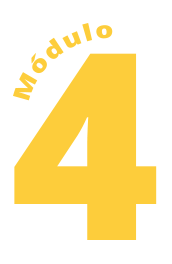
<style>
.page{position:relative;width:172px;height:264px;background:#ffffff}
.page>*{position:absolute;margin:0}
.t1{font:22.8px "OpenSans-Extrabold";letter-spacing:0.1em;color:#fdcd3b}
.t2{font:261.1px "OpenSans-Extrabold";color:#fdcd3b}
</style>
<div class="page">
<p class="t1" style="left:13px;top:23px;width:100px;height:78px;rotate:-36deg">Módulo</p>
<p class="t2" style="left:14px;top:53px;width:143px;height:187px">4</p>
</div>
